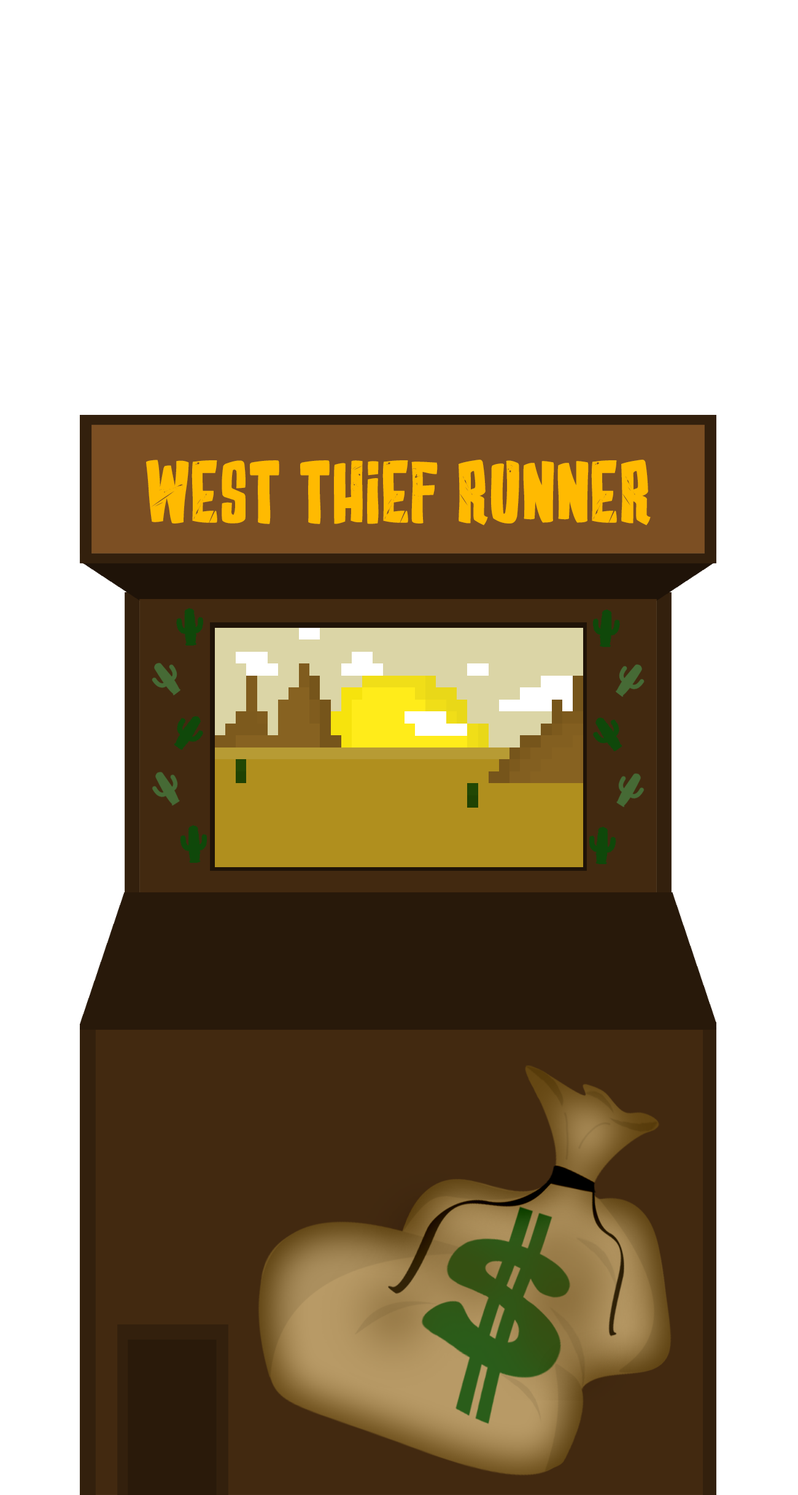
<style>
.page{position:relative;width:798px;height:1495px;background:#ffffff}
.page>*{position:absolute;margin:0}
.t1{font:49.8px "EdWoodMovies";color:#ffba01}
</style>
<div class="page">
<p class="t1" style="left:146px;top:460px;width:504px;height:65px">WEST THIEF RUNNER</p>
</div>
